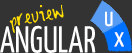
<style>
.page{position:relative;width:132px;height:53px;background:#333333}
.page>*{position:absolute;margin:0}
.t1{font:23.9px "Shirley";color:#ffde00;scale:0.9 1}
.t2{font:28.4px "YanoneKaffeesatz-Regular";color:#ffffff;scale:0.91 1}
.t3{font:37.6px "YanoneKaffeesatz-Regular";color:#ffffff;scale:0.91 1}
</style>
<div class="page">
<p class="t1" style="left:9px;top:4px;width:55px;height:29px;rotate:-10deg">preview</p>
<p class="t2" style="left:105px;top:11px;width:8px;height:16px">u</p>
<p class="t3" style="left:0px;top:25px;width:96px;height:28px">ANGULAR</p>
<p class="t2" style="left:114px;top:32px;width:10px;height:15px">x</p>
</div>
